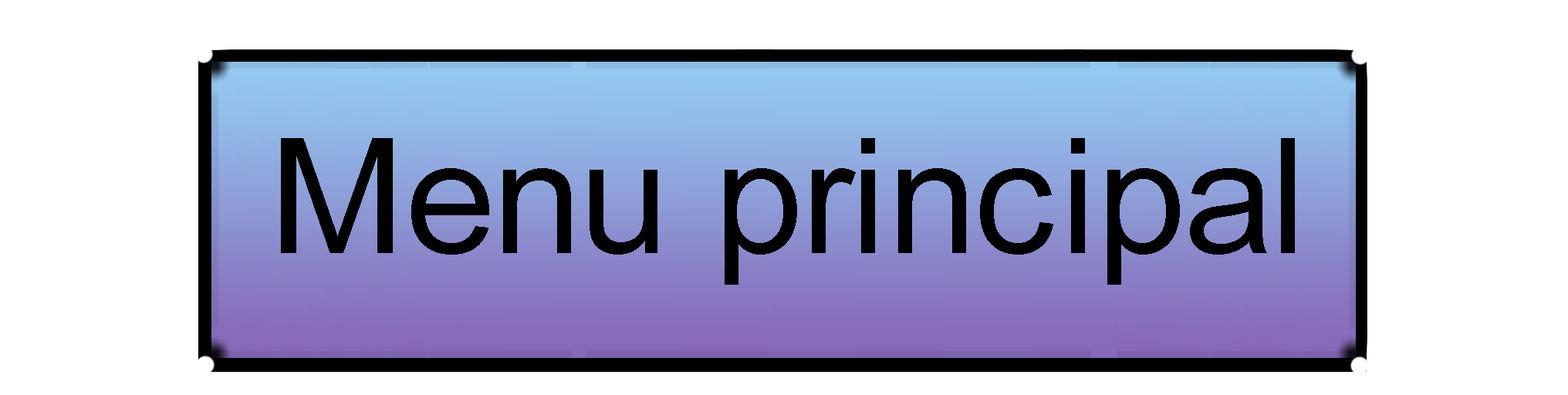
<style>
.page{position:relative;width:1568px;height:395px;background:#ffffff}
.page>*{position:absolute;margin:0}
.t1{font:160.5px "ArialMT";color:#000000}
</style>
<div class="page">
<p class="t1" style="left:281px;top:138px;width:1014px;height:147px">Menu principal</p>
</div>
